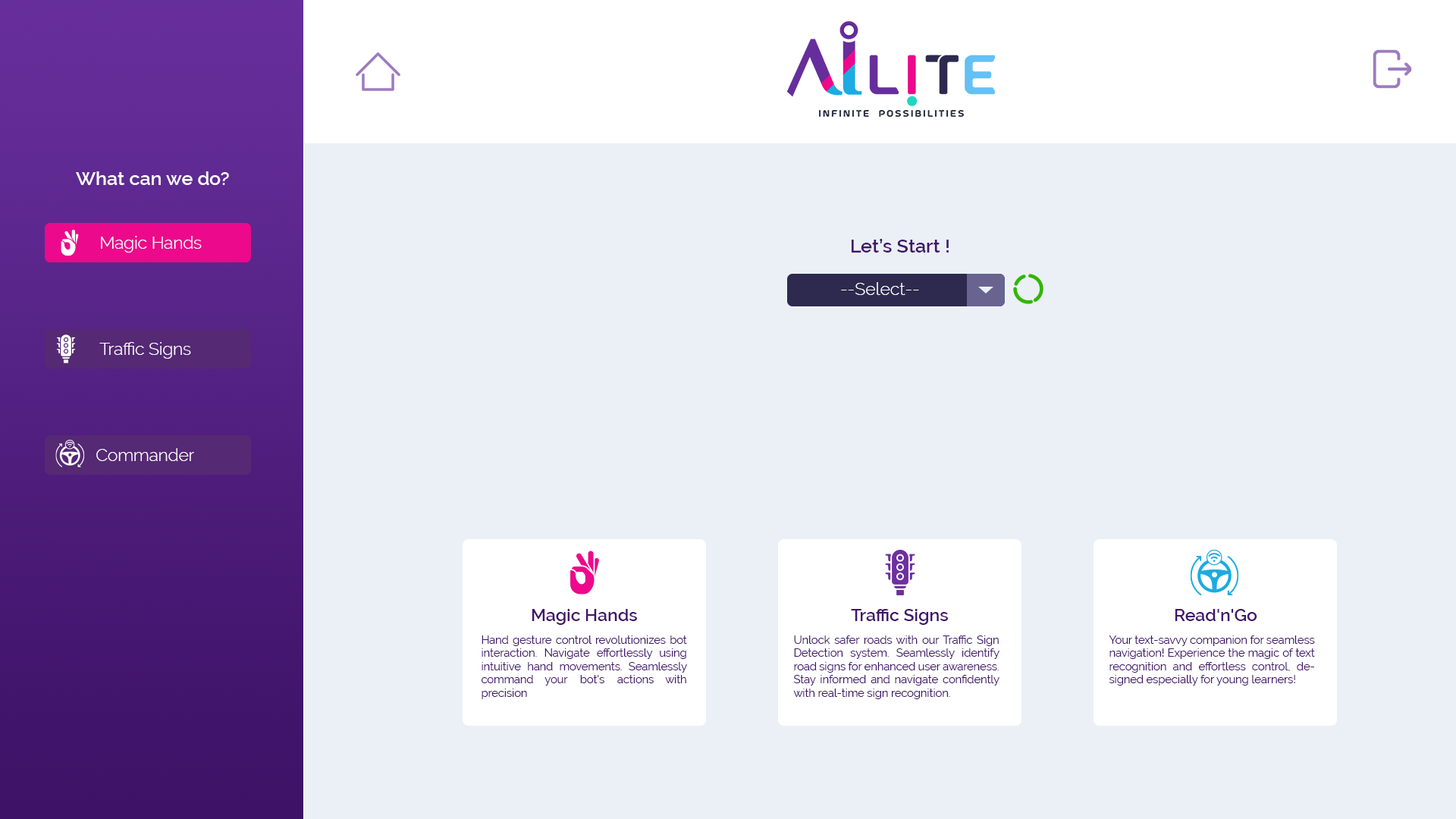
<style>
.page{position:relative;width:1456px;height:819px;background:#ebf0f6}
.page>*{position:absolute;margin:0}
.t1{font:19px "Raleway-SemiBold";color:#ffffff}
.t2{font:17.1px "Raleway-Light";color:#ffffff}
.t3{font:19px "Raleway-SemiBold";color:#41146b}
.t4{font:17.4px "Raleway-Light";color:#ffffff}
.t5{font:17.4px "Raleway-SemiBold";color:#41146b}
.t6{font:11.1px "Raleway-Regular";color:#41146b}
</style>
<div class="page">
<p class="t1" style="left:76px;top:171px;width:153px;height:14px">What can we do?</p>
<p class="t2" style="left:101px;top:236px;width:101px;height:17px">Magic Hands</p>
<p class="t3" style="left:852px;top:239px;width:97px;height:14px">Let’s Start !</p>
<p class="t4" style="left:841px;top:282px;width:78px;height:13px">--Select--</p>
<p class="t2" style="left:99px;top:342px;width:92px;height:17px">Traffic Signs</p>
<p class="t2" style="left:96px;top:448px;width:98px;height:13px">Commander</p>
<p class="t5" style="left:532px;top:609px;width:105px;height:16px">Magic Hands</p>
<p class="t5" style="left:851px;top:609px;width:97px;height:16px">Traffic Signs</p>
<p class="t5" style="left:1175px;top:609px;width:82px;height:12px">Read'n'Go</p>
<p class="t6" style="left:482px;top:635px;width:205px;height:64px;text-align:justify">Hand gesture control revolutionizes bot interaction. Navigate effortlessly using intuitive hand movements. Seamlessly command your bot's actions with precision</p>
<p class="t6" style="left:793px;top:635px;width:206px;height:64px;text-align:justify">Unlock safer roads with our Traffic Sign Detection system. Seamlessly identify road signs for enhanced user awareness. Stay informed and navigate confidently with real-time sign recognition.</p>
<p class="t6" style="left:1109px;top:635px;width:206px;height:51px;text-align:justify">Your text-savvy companion for seamless navigation! Experience the magic of text recognition and effortless control, designed especially for young learners!</p>
</div>
